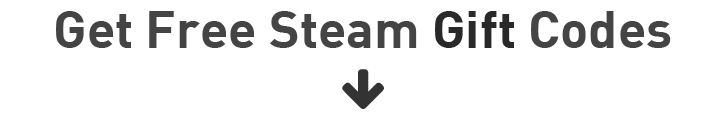
<style>
.page{position:relative;width:720px;height:120px;background:#ffffff}
.page>*{position:absolute;margin:0}
.t1{font:52px "DINBold";color:#444444}
.t2{font:52px "DINBold";color:#292929}
</style>
<div class="page">
<p class="t1" style="left:56px;top:11px;width:615px;height:37px">Get Free Steam <span class="t2">Gift</span> Codes</p>
</div>
